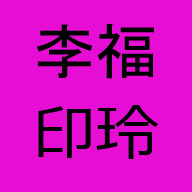
<style>
.page{position:relative;width:192px;height:192px;background:#e60ed5}
.page>*{position:absolute;margin:0}
.t1{font:60.2px "MS-Gothic";color:#000000;scale:1.05 1}
.t2{font:60.2px "Meiryo";color:#000000;scale:1.05 1}
</style>
<div class="page">
<p class="t1" style="left:37px;top:24px;width:117px;height:55px">李福</p>
<p class="t2" style="left:38px;top:105px;width:120px;height:54px">印玲</p>
</div>
